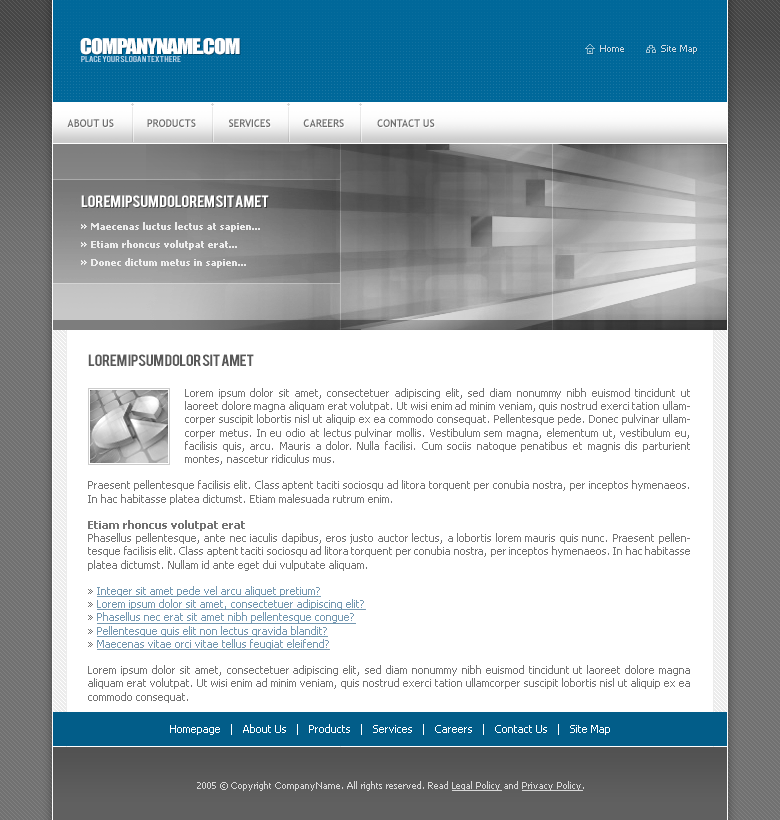
<style>
.page{position:relative;width:780px;height:820px;background:#ffffff}
.page>*{position:absolute;margin:0}
.t1{font:20px "Impact";letter-spacing:-0.05em;color:#ffffff;text-transform:uppercase;scale:1.1 1}
.t2{font:9px "Tahoma";color:#cbd9e4}
.t3{font:6.8px "Bebas";color:#b2d6eb;text-transform:uppercase;scale:1.18 1}
.t4{font:11px "TrebuchetMS-Bold";color:#6e6e6e;text-transform:uppercase;scale:0.9 1}
.t5{font:12.8px "Bebas";letter-spacing:-0.025em;color:#ffffff;text-transform:uppercase;scale:1.18 1}
.t6{font:10px/18px "Tahoma-Bold";color:#ffffff}
.t7{font:12.8px "Bebas";letter-spacing:-0.025em;color:#585858;text-transform:uppercase;scale:1.18 1}
.t8{font:11px "Tahoma";color:#737373}
.t9{font:11px "Tahoma-Bold";color:#737373}
.t10{font:11px "Tahoma";color:#737373;text-decoration:underline}
.t11{font:11px "Tahoma";color:#ffffff}
.t12{font:9px "Tahoma";color:#d7d7d7}
.t13{font:9px "Tahoma";color:#d7d7d7;text-decoration:underline}
</style>
<div class="page">
<p class="t1" style="left:80px;top:38px;width:160px;height:17px">companyname.com</p>
<p class="t2" style="left:600px;top:45px;width:97px;height:9px">Home            Site Map</p>
<p class="t3" style="left:81px;top:56px;width:100px;height:6px">place your slogan text here</p>
<p class="t4" style="left:67px;top:119px;width:368px;height:8px">About Us           Products           Services           careers           Contact Us</p>
<p class="t5" style="left:81px;top:195px;width:188px;height:12px">Lorem Ipsum Dolorem Sit Amet</p>
<p class="t6" style="left:81px;top:222px;width:179px;height:46px;text-align:justify;opacity:0.8">» Maecenas luctus lectus at sapien...<br>» Etiam rhoncus volutpat erat...<br>» Donec dictum metus in sapien...</p>
<p class="t7" style="left:88px;top:354px;width:166px;height:12px">LOREM IPSUM DOLOR SIT AMET</p>
<p class="t8" style="left:88px;top:388px;width:602px;height:315px;text-align:justify">Lorem ipsum dolor sit amet, consectetuer adipiscing elit, sed diam nonummy nibh euismod tincidunt ut laoreet dolore magna aliquam erat volutpat. Ut wisi enim ad minim veniam, quis nostrud exerci tation ullamcorper suscipit lobortis nisl ut aliquip ex ea commodo consequat. Pellentesque pede. Donec pulvinar ullamcorper metus. In eu odio at lectus pulvinar mollis. Vestibulum sem magna, elementum ut, vestibulum eu, facilisis quis, arcu. Mauris a dolor. Nulla facilisi. Cum sociis natoque penatibus et magnis dis parturient montes, nascetur ridiculus mus. <br><br>Praesent pellentesque facilisis elit. Class aptent taciti sociosqu ad litora torquent per conubia nostra, per inceptos hymenaeos. In hac habitasse platea dictumst. Etiam malesuada rutrum enim.<br> <br><span class="t9">Etiam rhoncus volutpat erat<br></span>Phasellus pellentesque, ante nec iaculis dapibus, eros justo auctor lectus, a lobortis lorem mauris quis nunc. Praesent pellentesque facilisis elit. Class aptent taciti sociosqu ad litora torquent per conubia nostra, per inceptos hymenaeos. In hac habitasse platea dictumst. Nullam id ante eget dui vulputate aliquam. <br><br>» <span class="t10">Integer sit amet pede vel arcu aliquet pretium?<br></span>» <span class="t10">Lorem ipsum dolor sit amet, consectetuer adipiscing elit?<br></span>» <span class="t10">Phasellus nec erat sit amet nibh pellentesque congue?<br></span>» <span class="t10">Pellentesque quis elit non lectus gravida blandit?<br></span>» <span class="t10">Maecenas vitae orci vitae tellus feugiat eleifend?<br><br></span>Lorem ipsum dolor sit amet, consectetuer adipiscing elit, sed diam nonummy nibh euismod tincidunt ut laoreet dolore magna aliquam erat volutpat. Ut wisi enim ad minim veniam, quis nostrud exerci tation ullamcorper suscipit lobortis nisl ut aliquip ex ea commodo consequat.</p>
<p class="t11" style="left:170px;top:724px;width:440px;height:11px">Homepage   |   About Us   |   Products   |   Services   |   Careers   |   Contact Us   |   Site Map</p>
<p class="t12" style="left:197px;top:781px;width:387px;height:10px">2005 © Copyright CompanyName. All rights reserved. Read <span class="t13">Legal Policy</span> and <span class="t13">Privacy Policy</span>.</p>
</div>
